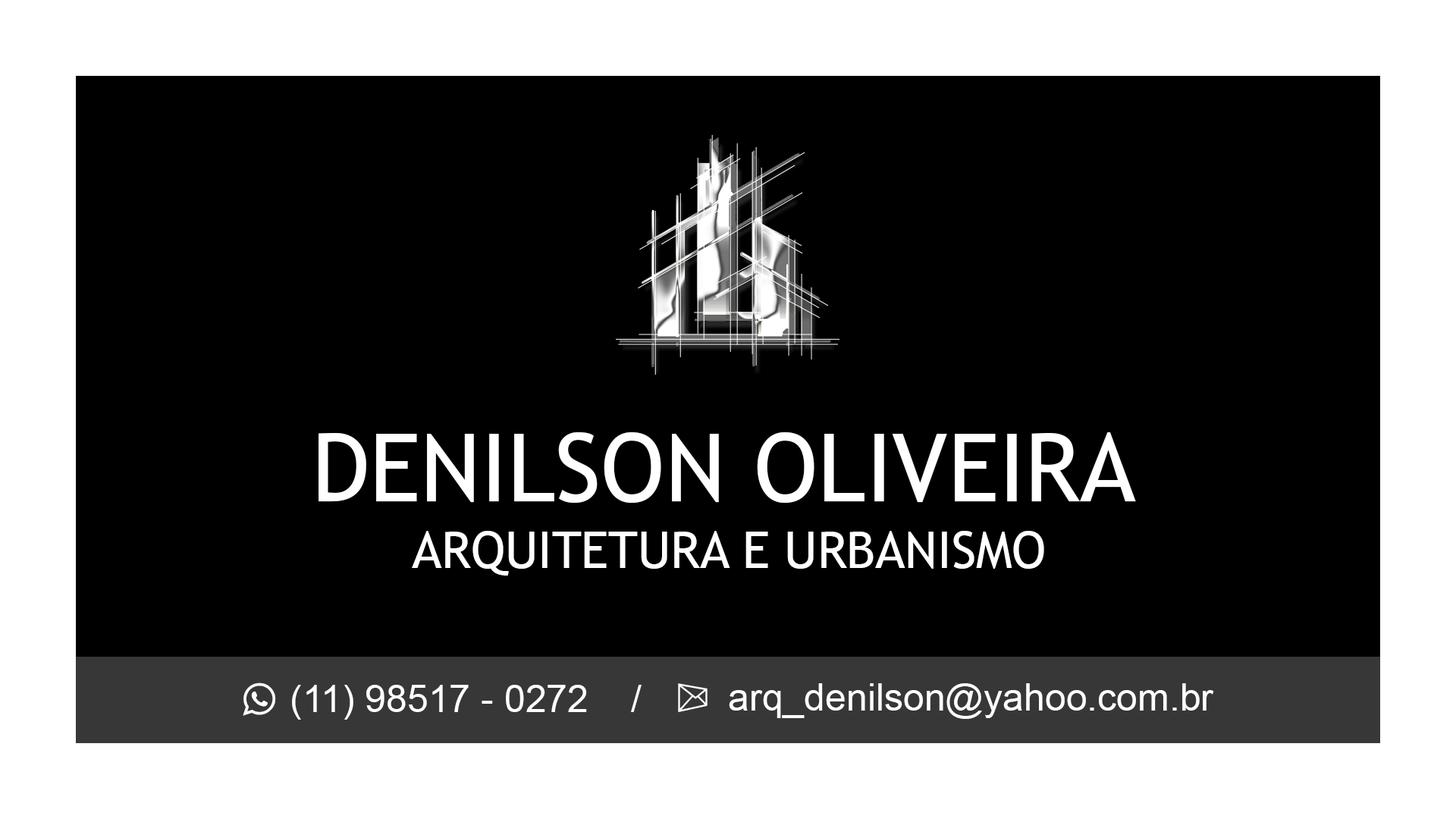
<style>
.page{position:relative;width:1456px;height:819px;background:#000000}
.page>*{position:absolute;margin:0}
.t1{font:94.8px "TrebuchetMS";color:#ffffff}
.t2{font:50.6px "TrebuchetMS";color:#ffffff}
.t3{font:37.9px "ArialMT";color:#ffffff}
.t4{font:37.9px "Sosmed_phone-Regular";color:#ffffff}
</style>
<div class="page">
<p class="t1" style="left:318px;top:432px;width:818px;height:71px">DENILSON OLIVEIRA</p>
<p class="t2" style="left:412px;top:531px;width:632px;height:45px">ARQUITETURA E URBANISMO</p>
<p class="t3" style="left:243px;top:682px;width:399px;height:38px"><span class="t4">a </span>(11) 98517 - 0272    /</p>
<p class="t3" style="left:678px;top:683px;width:536px;height:36px"><span class="t4">Z  </span>arq_denilson@yahoo.com.br</p>
</div>
